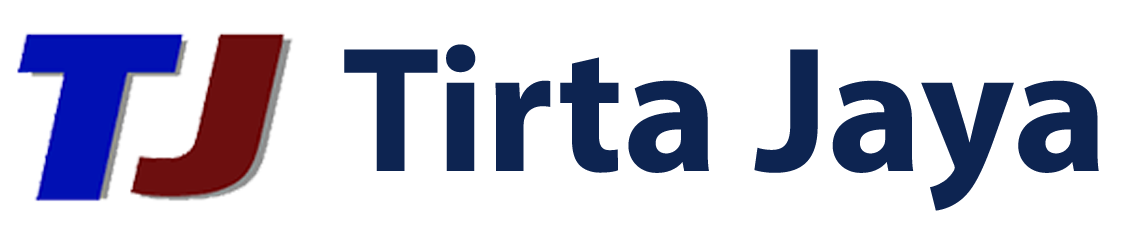
<style>
.page{position:relative;width:1121px;height:233px;background:#ffffff}
.page>*{position:absolute;margin:0}
.t1{font:179.8px "MyriadPro-Bold";color:#0d2451}
</style>
<div class="page">
<p class="t1" style="left:344px;top:44px;width:755px;height:167px">Tirta Jaya</p>
</div>
